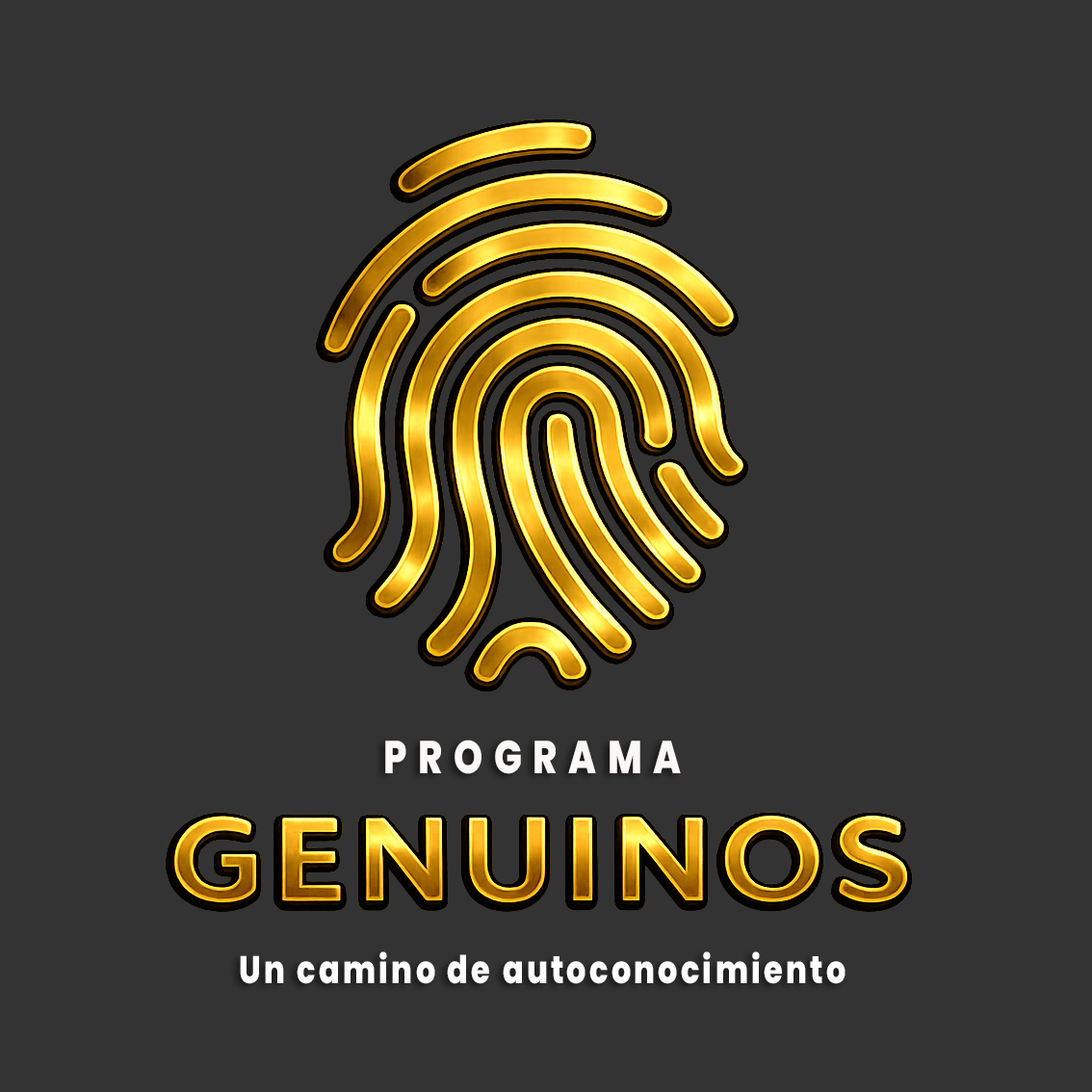
<style>
.page{position:relative;width:1092px;height:1092px;background:#333333}
.page>*{position:absolute;margin:0}
.t1{font:46.2px "Poppins-ExtraBold";letter-spacing:0.3em;color:#fbf7f7;scale:0.8 1}
.t2{font:38.5px "Poppins-ExtraBold";letter-spacing:0.1em;color:#fefefe;scale:0.8 1}
</style>
<div class="page">
<p class="t1" style="left:385px;top:740px;width:296px;height:34px">PROGRAMA</p>
<p class="t2" style="left:240px;top:951px;width:605px;height:33px">Un camino de autoconocimiento</p>
</div>
